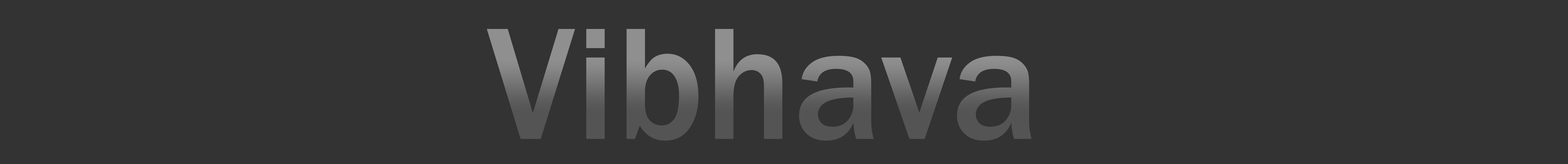
<style>
.page{position:relative;width:1568px;height:164px;background:#333333}
.page>*{position:absolute;margin:0}
.t1{font:164.4px "FranklinGothic-Medium"}
</style>
<div class="page">
<p class="t1" style="left:487px;top:29px;width:545px;height:111px">Vibhava</p>
</div>
